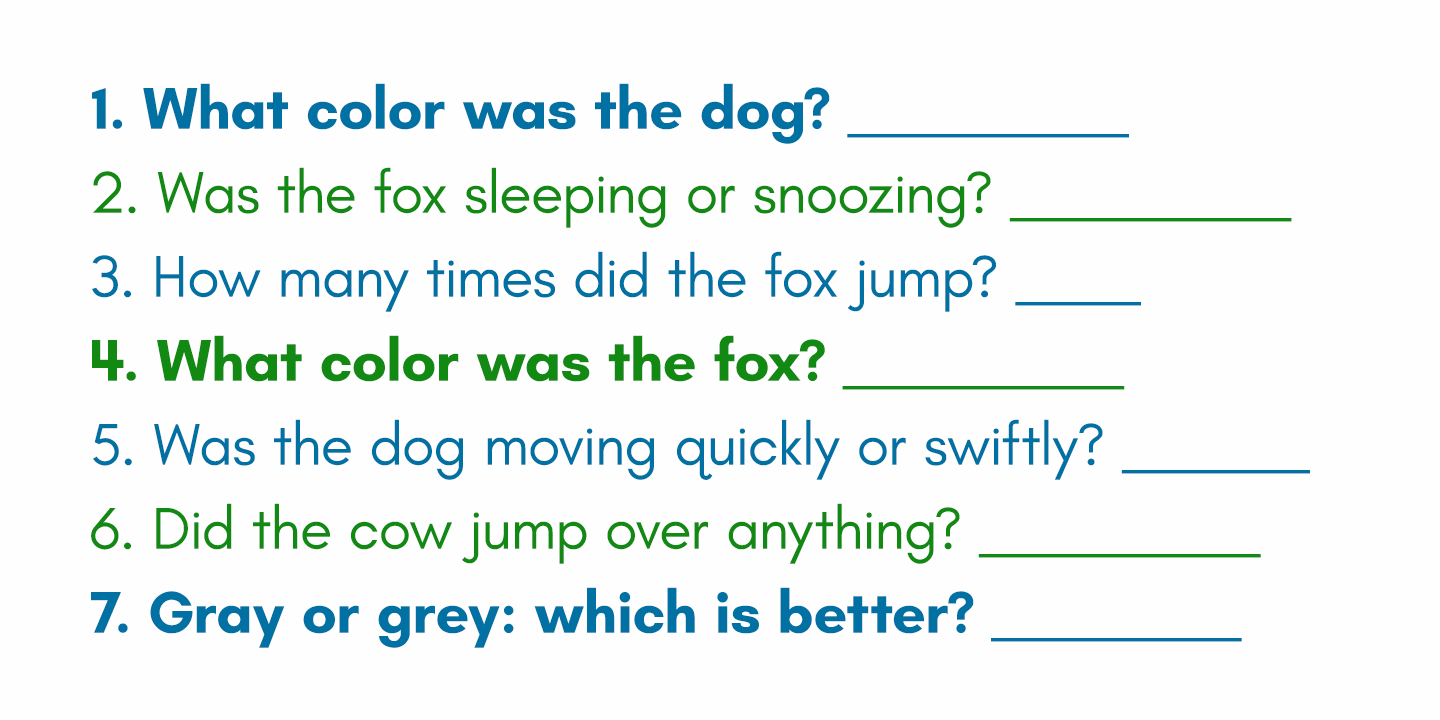
<style>
.page{position:relative;width:1440px;height:720px;background:#fefefe}
.page>*{position:absolute;margin:0}
.t1{font:60px/84px "Teachers-Regular";color:#0071a2}
.t2{font:60px/84px "Teachers-Bold";color:#0071a2}
.t3{font:60px/84px "Teachers-Regular";color:#118913}
.t4{font:60px/84px "Teachers-Bold";color:#118913}
</style>
<div class="page">
<p class="t1" style="left:91px;top:83px;width:1219px;height:565px"><span class="t2">1. What color was the dog? </span>_________<br><span class="t3">2. Was the fox sleeping or snoozing? _________<br></span>3. How many times did the fox jump? ____<br><span class="t4">4. What color was the fox? </span><span class="t3">_________<br></span>5. Was the dog moving quickly or swiftly? ______<br><span class="t3">6. Did the cow jump over anything? _________<br></span><span class="t2">7. Gray or grey: which is better? </span>________</p>
</div>
